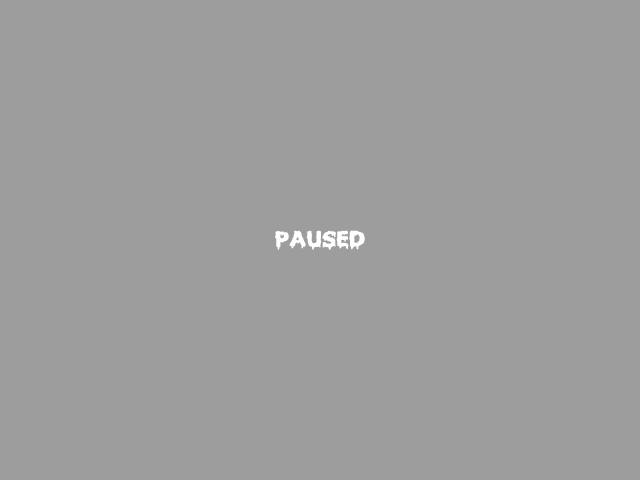
<style>
.page{position:relative;width:640px;height:480px;background:#9d9d9d}
.page>*{position:absolute;margin:0}
.t1{font:24px "Liquidismpart2";color:#ffffff}
</style>
<div class="page">
<p class="t1" style="left:275px;top:230px;width:90px;height:20px">PAUSED</p>
</div>
